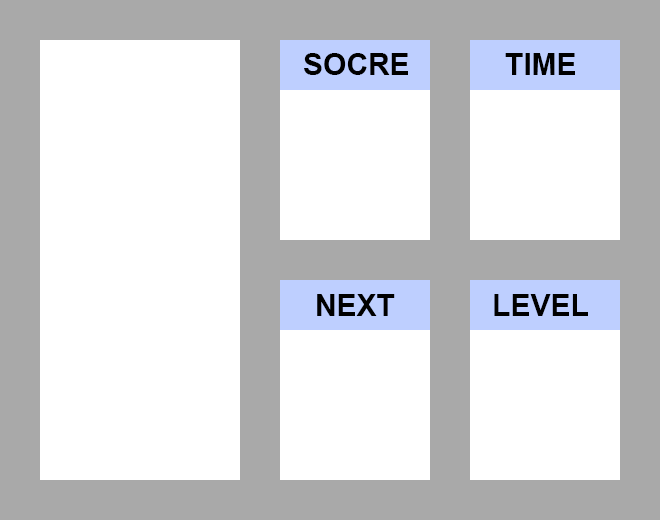
<style>
.page{position:relative;width:660px;height:520px;background:#ffffff}
.page>*{position:absolute;margin:0}
.t1{font:30px "Arial-BoldMT";color:#000000}
</style>
<div class="page">
<p class="t1" style="left:304px;top:53px;width:104px;height:22px">SOCRE</p>
<p class="t1" style="left:505px;top:53px;width:70px;height:22px">TIME</p>
<p class="t1" style="left:317px;top:294px;width:78px;height:22px">NEXT</p>
<p class="t1" style="left:494px;top:294px;width:94px;height:22px">LEVEL</p>
</div>
